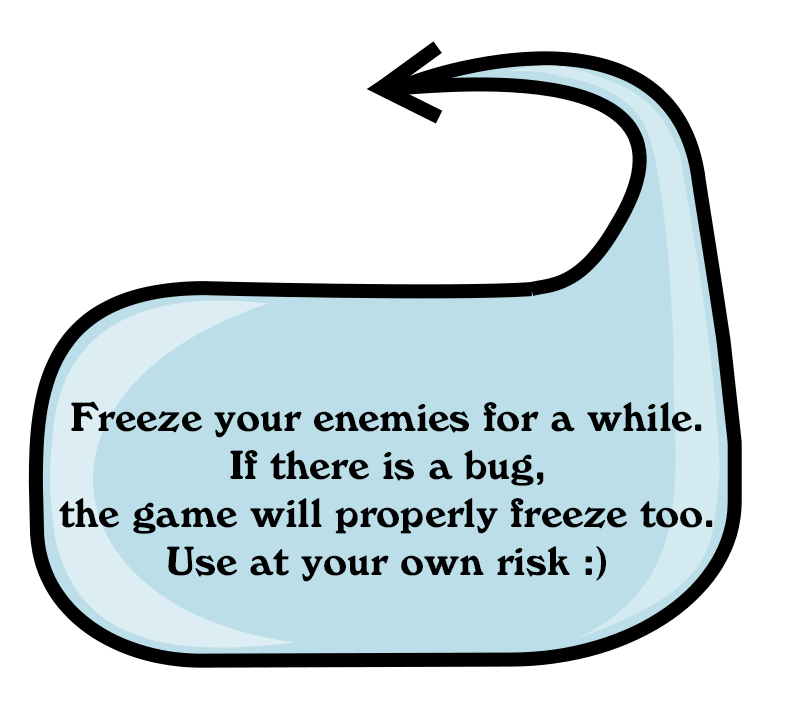
<style>
.page{position:relative;width:800px;height:707px;background:#ffffff}
.page>*{position:absolute;margin:0}
.t1{font:40px "UTM-Windsor-BT";color:#000000}
</style>
<div class="page">
<p class="t1" style="left:59px;top:401px;width:654px;height:181px;text-align:center">Freeze your enemies for a while.<br>If there is a bug, <br>the game will properly freeze too.<br>Use at your own risk :)</p>
</div>
